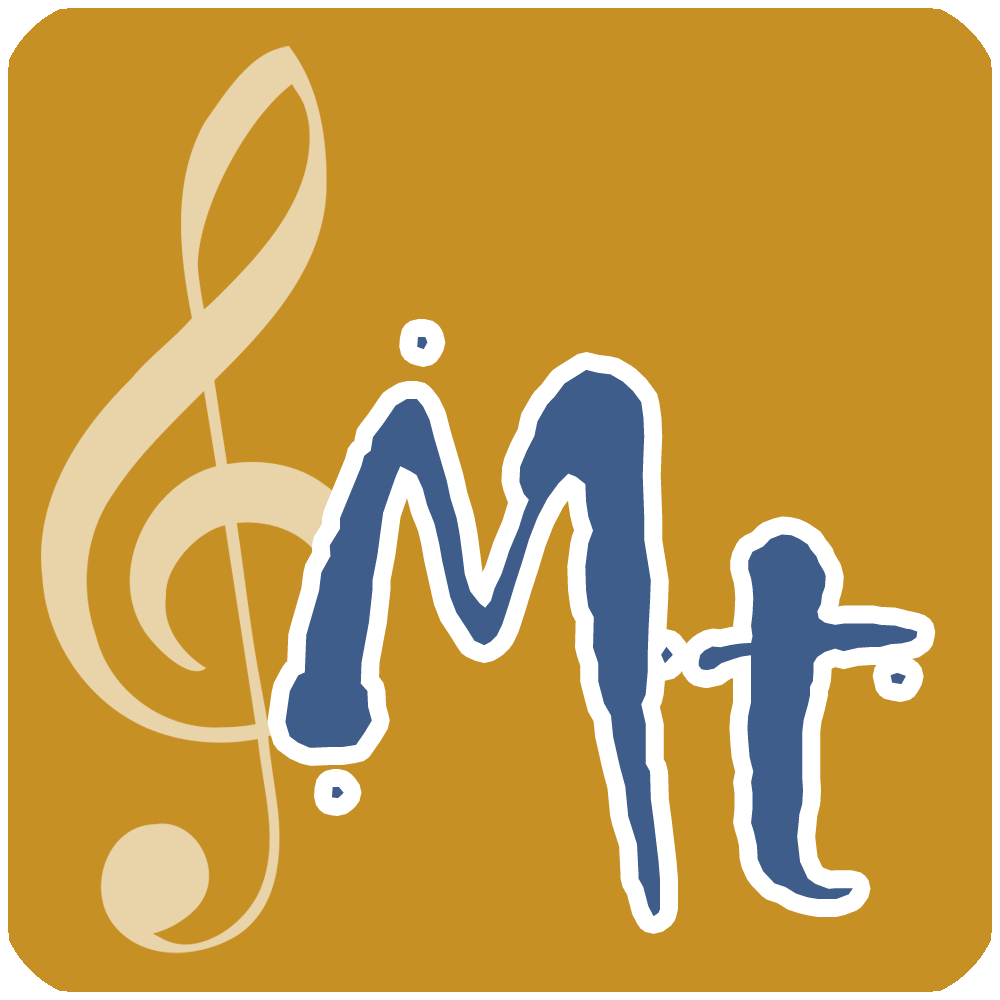
<style>
.page{position:relative;width:1000px;height:1000px;background:#c79025}
.page>*{position:absolute;margin:0}
.t1{font:750px "Chiller-Regular";color:#3f5d8a}
</style>
<div class="page">
<p class="t1" style="left:285px;top:337px;width:633px;height:579px">Mt</p>
</div>
